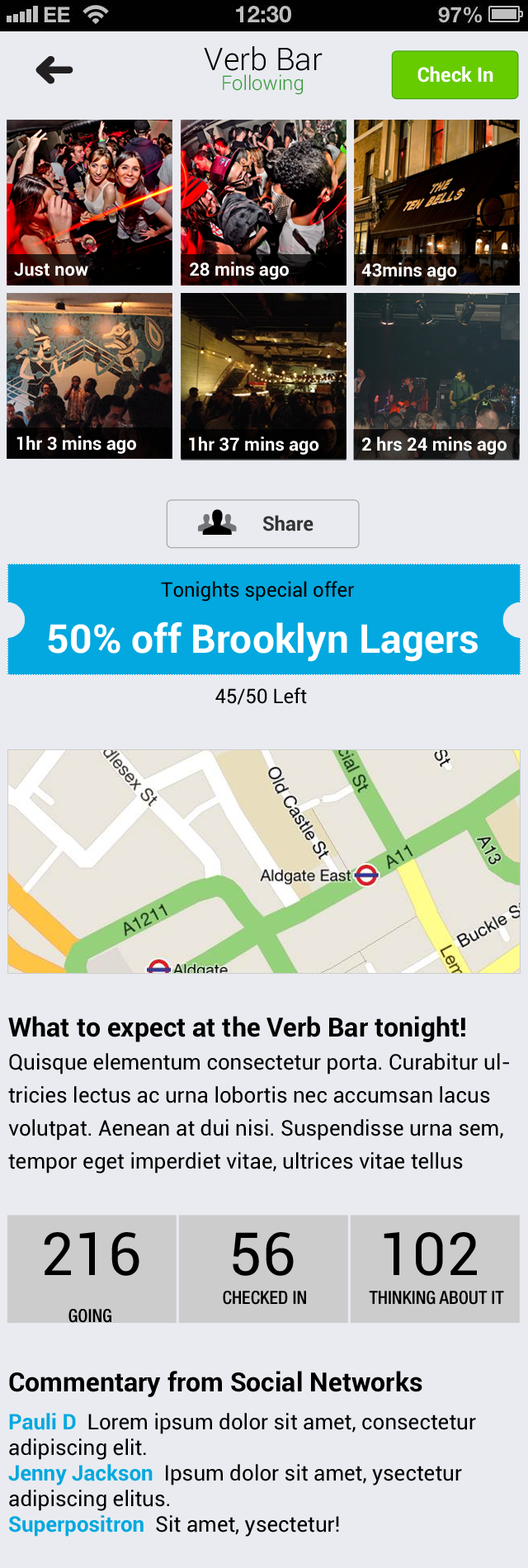
<style>
.page{position:relative;width:528px;height:1568px;background:#e9ebf0}
.page>*{position:absolute;margin:0}
.t1{font:31.4px "Roboto-Light";color:#000000}
.t2{font:19.8px "Roboto-Light";color:#339933}
.t3{font:19.8px "Roboto-Bold";color:#ffffff}
.t4{font:18.2px "Roboto-Bold";color:#ffffff}
.t5{font:19.8px "Roboto-Bold";color:#333333}
.t6{font:19.8px "Roboto-Regular";color:#000000}
.t7{font:39.6px "Roboto-Bold";color:#ffffff}
.t8{font:21.5px/33px "Roboto-Regular";color:#000000}
.t9{font:26.4px/33px "Roboto-Bold";color:#000000}
.t10{font:59.4px "Roboto-Regular";color:#000000}
.t11{font:18.2px "HelveticaNeueLTPro-MdCn";color:#000000}
.t12{font:26.4px "Roboto-Bold";color:#000000}
.t13{font:21.5px "Roboto-Regular";color:#000000}
.t14{font:21.5px "Roboto-Bold";color:#02a8df}
</style>
<div class="page">
<p class="t1" style="left:204px;top:46px;width:119px;height:25px">Verb Bar</p>
<p class="t2" style="left:223px;top:74px;width:80px;height:21px">Following</p>
<p class="t3" style="left:418px;top:66px;width:76px;height:17px">Check In</p>
<p class="t4" style="left:14px;top:262px;width:74px;height:14px">Just now</p>
<p class="t4" style="left:190px;top:262px;width:99px;height:18px">28 mins ago</p>
<p class="t4" style="left:361px;top:262px;width:96px;height:19px">43mins ago</p>
<p class="t4" style="left:17px;top:436px;width:119px;height:18px">1hr 3 mins ago</p>
<p class="t4" style="left:189px;top:437px;width:130px;height:18px">1hr 37 mins ago</p>
<p class="t4" style="left:362px;top:437px;width:145px;height:18px">2 hrs 24 mins ago</p>
<p class="t5" style="left:263px;top:515px;width:51px;height:16px">Share</p>
<p class="t6" style="left:161px;top:581px;width:193px;height:21px">Tonights special offer</p>
<p class="t7" style="left:48px;top:622px;width:430px;height:40px">50% off Brooklyn Lagers</p>
<p class="t6" style="left:215px;top:687px;width:92px;height:18px">45/50 Left</p>
<p class="t8" style="left:8px;top:1016px;width:501px;height:158px"><span class="t9">What to expect at the Verb Bar tonight!<br></span>Quisque elementum consectetur porta. Curabitur ultricies lectus ac urna lobortis nec accumsan lacus volutpat. Aenean at dui nisi. Suspendisse urna sem, tempor eget imperdiet vitae, ultrices vitae tellus</p>
<p class="t10" style="left:44px;top:1232px;width:95px;height:44px">216</p>
<p class="t10" style="left:233px;top:1232px;width:61px;height:44px">56</p>
<p class="t10" style="left:384px;top:1232px;width:93px;height:44px">102</p>
<p class="t11" style="left:223px;top:1291px;width:83px;height:14px">CHECKED IN</p>
<p class="t11" style="left:369px;top:1291px;width:135px;height:14px">THINKING ABOUT IT</p>
<p class="t11" style="left:68px;top:1309px;width:43px;height:14px">GOING</p>
<p class="t12" style="left:9px;top:1371px;width:414px;height:26px">Commentary from Social Networks</p>
<p class="t13" style="left:8px;top:1413px;width:468px;height:124px"><span class="t14">Pauli D</span>  Lorem ipsum dolor sit amet, consectetur adipiscing elit. <br><span class="t14">Jenny Jackson</span>  Ipsum dolor sit amet, ysectetur adipiscing elitus.<br><span class="t14">Superpositron</span>  Sit amet, ysectetur!</p>
</div>
